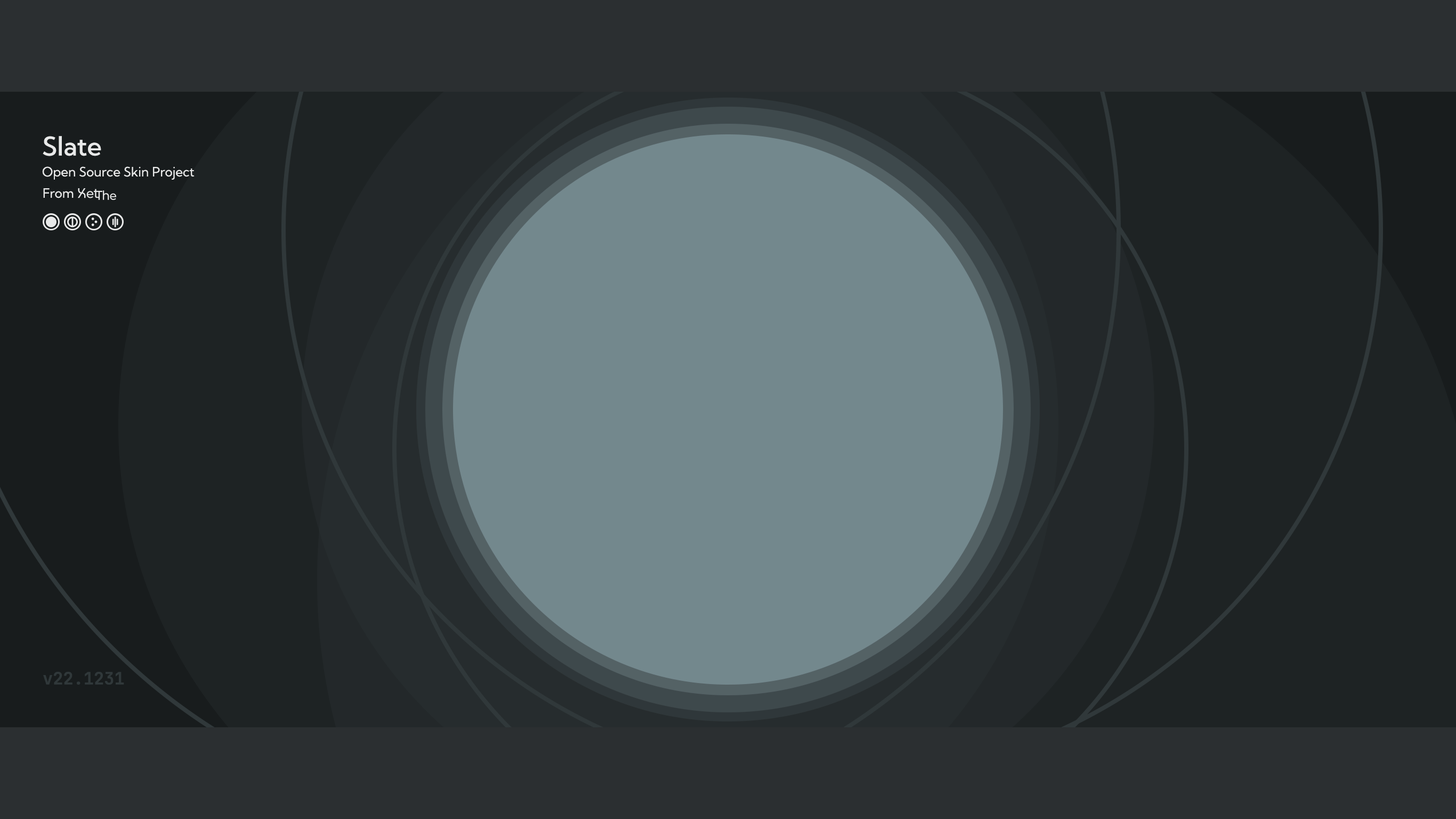
<style>
.page{position:relative;width:1456px;height:819px;background:#1e2324}
.page>*{position:absolute;margin:0}
.t1{font:25.6px "KumbhSans-Medium";color:#ffffff}
.t2{font:12.8px "KumbhSans-Regular";color:#ffffff}
.t3{font:17.1px "JetBrainsMono-Bold";color:#30383a}
</style>
<div class="page">
<p class="t1" style="left:43px;top:136px;width:58px;height:20px">Slate</p>
<p class="t2" style="left:42px;top:166px;width:153px;height:14px">Open Source Skin Project</p>
<p class="t2" style="left:43px;top:188px;width:31px;height:10px">From</p>
<p class="t3" style="left:43px;top:671px;width:81px;height:13px">v22.1231</p>
</div>
